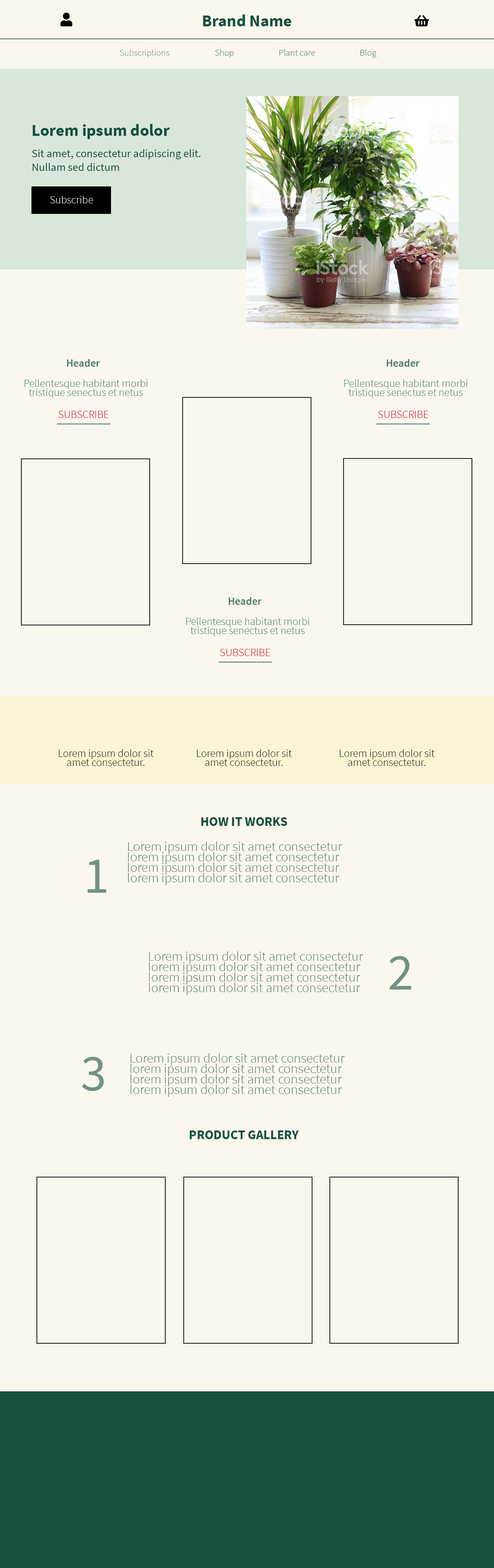
<style>
.page{position:relative;width:494px;height:1568px;background:#faf7ee}
.page>*{position:absolute;margin:0}
.t1{font:16.6px "SourceSansPro-Bold";color:#165040}
.t2{font:9px "SourceSansPro-Light";color:#709286}
.t3{font:9px "SourceSansPro-Light";color:#4d786a}
.t4{font:11.2px "SourceSansPro-Regular";color:#165040}
.t5{font:10.8px "SourceSansPro-Light";color:#000000}
.t6{font:13px "SourceSansPro-Bold";color:#165040;text-transform:uppercase}
.t7{font:13.4px/10.5px "SourceSansPro-Light";color:#4d786a}
.t8{font:51.7px "SourceSansPro-Regular";color:#709286;text-transform:uppercase}
</style>
<div class="page">
<p class="t1" style="left:203px;top:14px;width:88px;height:12px">Brand Name</p>
<p class="t2" style="left:120px;top:49px;width:49px;height:8px">Subscriptions</p>
<p class="t3" style="left:215px;top:49px;width:18px;height:8px">Shop</p>
<p class="t3" style="left:279px;top:49px;width:36px;height:7px">Plant care</p>
<p class="t3" style="left:360px;top:49px;width:16px;height:8px">Blog</p>
<p class="t1" style="left:33px;top:124px;width:137px;height:15px">Lorem ipsum dolor</p>
<p class="t4" style="left:32px;top:149px;width:169px;height:22px">Sit amet, consectetur adipiscing elit. Nullam sed dictum</p>
<p class="t5" style="left:59px;top:749px;width:95px;height:17px">Lorem ipsum dolor sit amet consectetur.</p>
<p class="t5" style="left:197px;top:749px;width:95px;height:17px">Lorem ipsum dolor sit amet consectetur.</p>
<p class="t5" style="left:339px;top:749px;width:95px;height:17px">Lorem ipsum dolor sit amet consectetur.</p>
<p class="t6" style="left:201px;top:817px;width:86px;height:9px">how it works</p>
<p class="t7" style="left:128px;top:841px;width:214px;height:44px">Lorem ipsum dolor sit amet consectetur lorem ipsum dolor sit amet consectetur lorem ipsum dolor sit amet consectetur lorem ipsum dolor sit amet consectetur</p>
<p class="t8" style="left:87px;top:860px;width:19px;height:33px">1</p>
<p class="t7" style="left:149px;top:951px;width:214px;height:44px">Lorem ipsum dolor sit amet consectetur lorem ipsum dolor sit amet consectetur lorem ipsum dolor sit amet consectetur lorem ipsum dolor sit amet consectetur</p>
<p class="t8" style="left:389px;top:956px;width:22px;height:34px">2</p>
<p class="t8" style="left:82px;top:1057px;width:22px;height:34px">3</p>
<p class="t7" style="left:130px;top:1053px;width:214px;height:44px">Lorem ipsum dolor sit amet consectetur lorem ipsum dolor sit amet consectetur lorem ipsum dolor sit amet consectetur lorem ipsum dolor sit amet consectetur</p>
<p class="t6" style="left:189px;top:1130px;width:110px;height:9px">Product Gallery</p>
</div>
